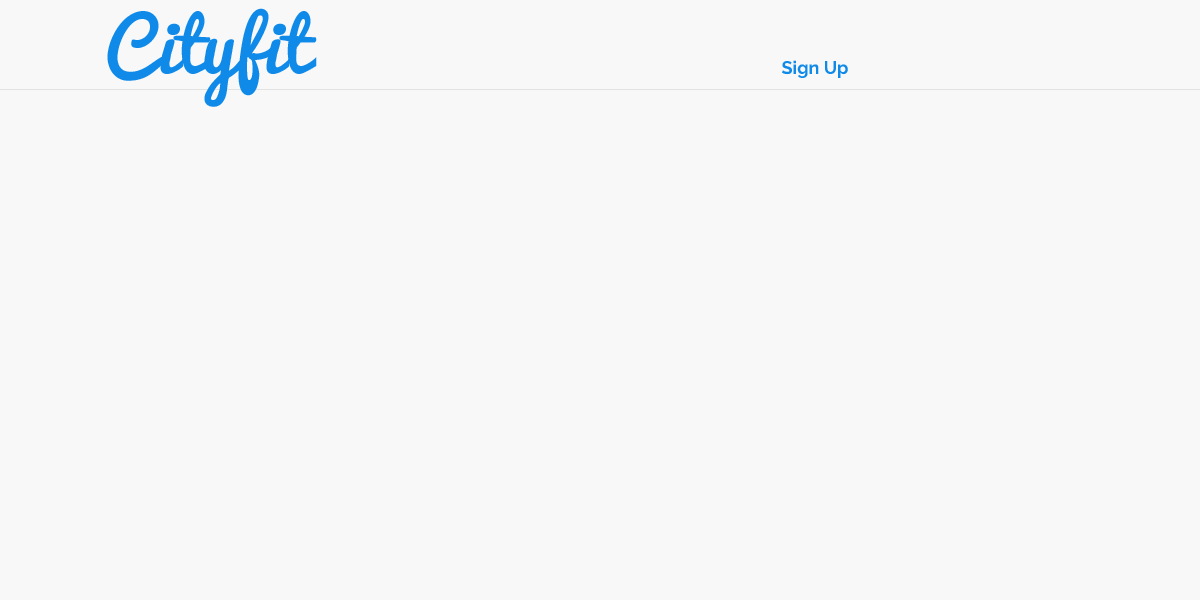
<style>
.page{position:relative;width:1200px;height:600px;background:#f8f8f8}
.page>*{position:absolute;margin:0}
.t1{font:72px "Pacifico";color:#108ae9}
.t2{font:18px "Raleway-Bold";color:#108ae9}
</style>
<div class="page">
<p class="t1" style="left:107px;top:8px;width:210px;height:99px">Cityfit</p>
<p class="t2" style="left:782px;top:60px;width:66px;height:18px">Sign Up</p>
</div>
